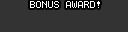
<style>
.page{position:relative;width:128px;height:32px;background:#333333}
.page>*{position:absolute;margin:0}
.t1{font:10px "Terminal";color:#ffffff}
</style>
<div class="page">
<p class="t1" style="left:30px;top:1px;width:70px;height:7px">BONUS AWARD!</p>
</div>
